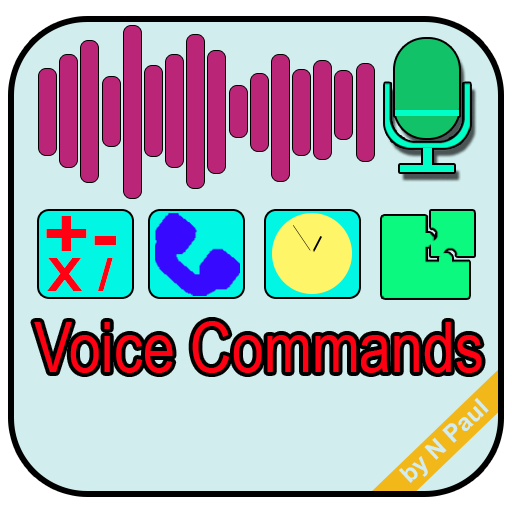
<style>
.page{position:relative;width:512px;height:512px;background:#d1eded}
.page>*{position:absolute;margin:0}
.t1{font:69.5px "Arial-BoldMT";color:#ff0113;scale:1.15 1}
.t2{font:46.3px "Arial-BoldMT";color:#ff0113;scale:1.15 1}
.t3{font:70px "ArialNarrow";color:#fe0012}
</style>
<div class="page">
<p class="t1" style="left:46px;top:216px;width:71px;height:35px">+-</p>
<p class="t2" style="left:47px;top:258px;width:66px;height:33px">X /</p>
<p class="t3" style="left:34px;top:321px;width:448px;height:52px">Voice Commands</p>
</div>
